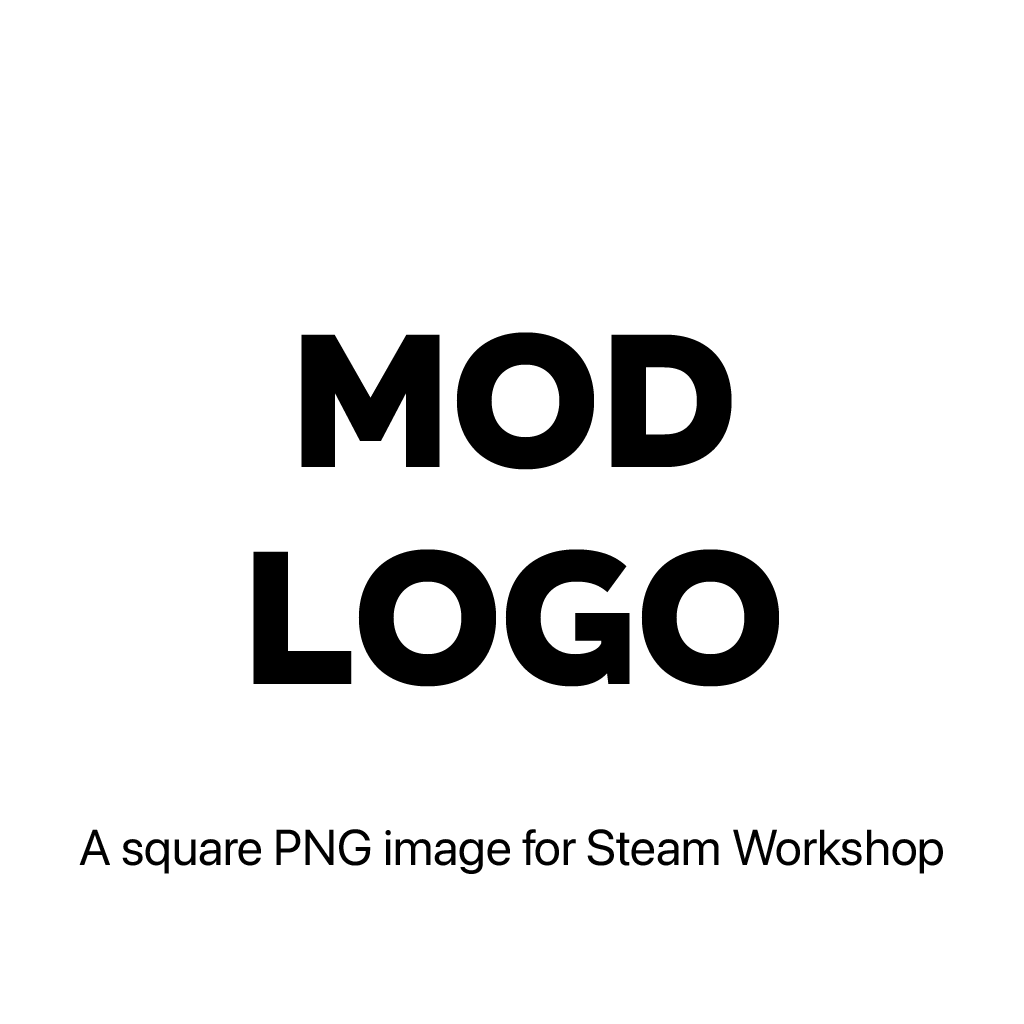
<style>
.page{position:relative;width:1024px;height:1024px;background:#ffffff}
.page>*{position:absolute;margin:0}
.t1{font:191px/217.2px "Organetto-UltraBold";color:#000000}
.t2{font:50px "SFPro-Regular";color:#000000}
</style>
<div class="page">
<p class="t1" style="left:253px;top:332px;width:526px;height:355px;text-align:center">MOD LOGO</p>
<p class="t2" style="left:79px;top:829px;width:864px;height:45px">A square PNG image for Steam Workshop</p>
</div>
